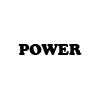
<style>
.page{position:relative;width:100px;height:100px;background:#ffffff}
.page>*{position:absolute;margin:0}
.t1{font:16px "CooperBlack";color:#000000}
</style>
<div class="page">
<p class="t1" style="left:18px;top:44px;width:64px;height:11px">POWER</p>
</div>
